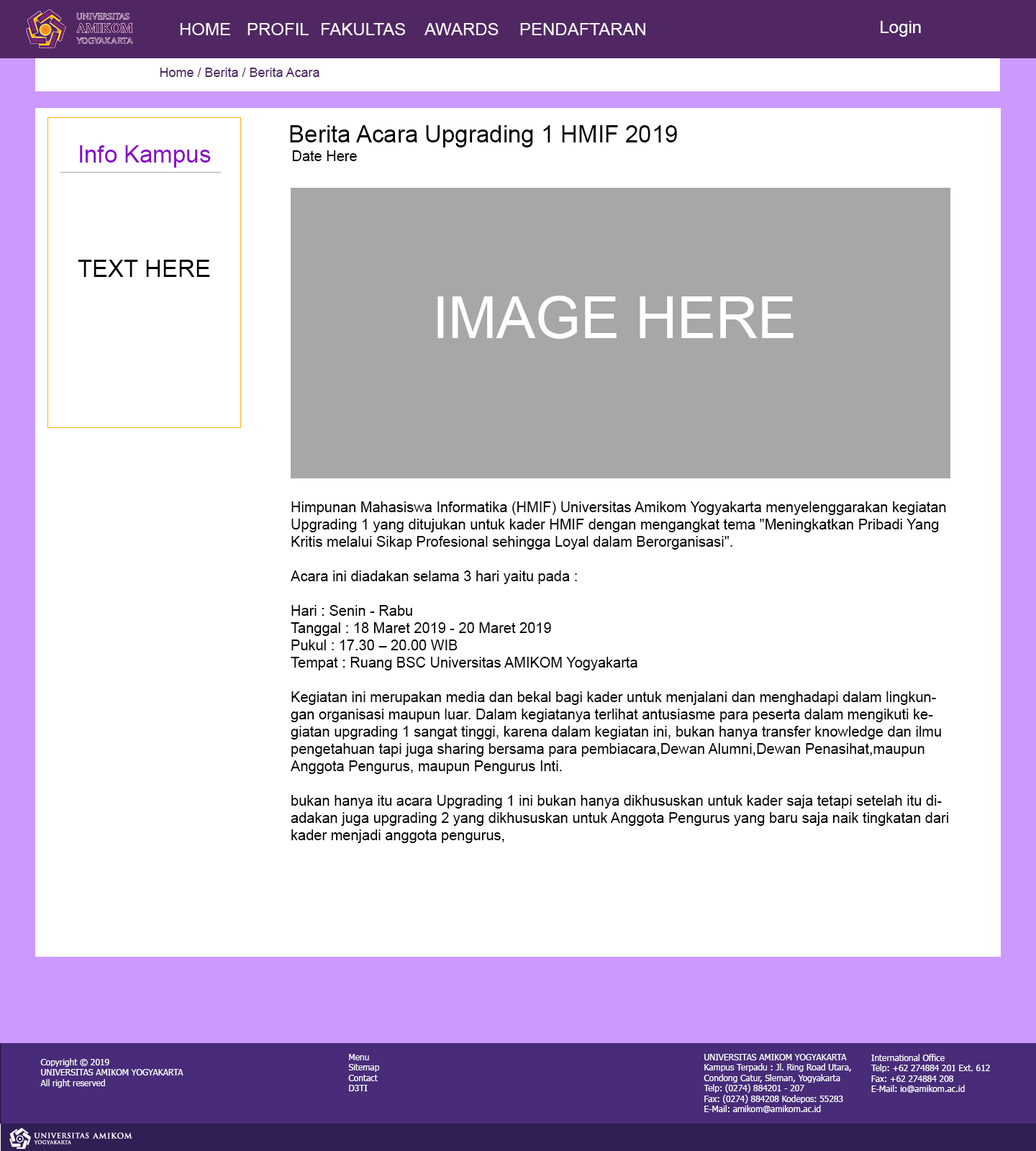
<style>
.page{position:relative;width:1036px;height:1151px;background:#ffffff}
.page>*{position:absolute;margin:0}
.t1{font:17.3px "ArialMT";color:#f7f7f7}
.t2{font:17.3px "ArialMT";color:#ffffff}
.t3{font:12.9px "ArialMT";color:#502763}
.t4{font:23.7px "ArialMT";color:#000000}
.t5{font:23.7px "ArialMT";color:#880ec7}
.t6{font:14.4px "ArialMT";color:#000000}
.t7{font:58px "ArialMT";color:#ffffff}
.t8{font:8.6px "Tahoma";color:#ffffff}
</style>
<div class="page">
<p class="t1" style="left:180px;top:23px;width:50px;height:12px">HOME</p>
<p class="t1" style="left:247px;top:23px;width:62px;height:12px">PROFIL</p>
<p class="t1" style="left:322px;top:23px;width:83px;height:12px">FAKULTAS</p>
<p class="t1" style="left:424px;top:23px;width:75px;height:12px">AWARDS</p>
<p class="t1" style="left:520px;top:23px;width:125px;height:12px">PENDAFTARAN</p>
<p class="t2" style="left:881px;top:21px;width:40px;height:16px">Login</p>
<p class="t3" style="left:160px;top:68px;width:159px;height:9px">Home / Berita / Berita Acara</p>
<p class="t4" style="left:290px;top:125px;width:387px;height:22px">Berita Acara Upgrading 1 HMIF 2019</p>
<p class="t5" style="left:78px;top:145px;width:133px;height:132px;text-align:center"><span class="t4"><br></span>Info Kampus<br><span class="t4"><br><br><br>TEXT HERE</span></p>
<p class="t6" style="left:292px;top:150px;width:65px;height:11px">Date Here</p>
<p class="t7" style="left:437px;top:296px;width:357px;height:43px">IMAGE HERE</p>
<p class="t6" style="left:291px;top:501px;width:657px;height:342px">Himpunan Mahasiswa Informatika (HMIF) Universitas Amikom Yogyakarta menyelenggarakan kegiatan Upgrading 1 yang ditujukan untuk kader HMIF dengan mengangkat tema "Meningkatkan Pribadi Yang Kritis melalui Sikap Profesional sehingga Loyal dalam Berorganisasi".<br><br>Acara ini diadakan selama 3 hari yaitu pada :<br><br>Hari : Senin - Rabu<br>Tanggal : 18 Maret 2019 - 20 Maret 2019<br>Pukul : 17.30 – 20.00 WIB<br>Tempat : Ruang BSC Universitas AMIKOM Yogyakarta<br><br>Kegiatan ini merupakan media dan bekal bagi kader untuk menjalani dan menghadapi dalam lingkungan organisasi maupun luar. Dalam kegiatanya terlihat antusiasme para peserta dalam mengikuti kegiatan upgrading 1 sangat tinggi, karena dalam kegiatan ini, bukan hanya transfer knowledge dan ilmu pengetahuan tapi juga sharing bersama para pembiacara,Dewan Alumni,Dewan Penasihat,maupun Anggota Pengurus, maupun Pengurus Inti.<br><br>bukan hanya itu acara Upgrading 1 ini bukan hanya dikhususkan untuk kader saja tetapi setelah itu diadakan juga upgrading 2 yang dikhususkan untuk Anggota Pengurus yang baru saja naik tingkatan dari kader menjadi anggota pengurus,</p>
<p class="t8" style="left:40px;top:1058px;width:143px;height:30px">Copyright © 2019<br>UNIVERSITAS AMIKOM YOGYAKARTA<br>All right reserved</p>
<p class="t8" style="left:348px;top:1054px;width:32px;height:37px">Menu<br>Sitemap<br>Contact<br>D3TI</p>
<p class="t8" style="left:704px;top:1054px;width:147px;height:59px">UNIVERSITAS AMIKOM YOGYAKARTA<br>Kampus Terpadu : Jl. Ring Road Utara,<br>Condong Catur, Sleman, Yogyakarta<br>Telp: (0274) 884201 - 207<br>Fax: (0274) 884208 Kodepos: 55283<br>E-Mail: amikom@amikom.ac.id</p>
<p class="t8" style="left:870px;top:1054px;width:120px;height:39px">International Office<br>Telp: +62 274884 201 Ext. 612<br>Fax: +62 274884 208<br>E-Mail: io@amikom.ac.id</p>
</div>
